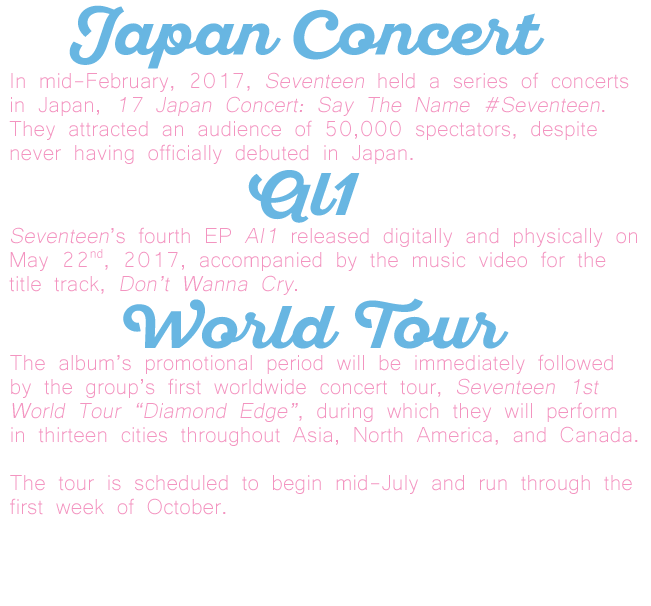
<style>
.page{position:relative;width:651px;height:606px;background:#ffffff}
.page>*{position:absolute;margin:0}
.t1{font:60px "SantEliaScript-BoldDMO";color:#68b6e2;scale:1.1 1}
.t2{font:28px/24px "Microsoft-Yi-Baiti";color:#f394c0}
.t3{font:28px/24px "Microsoft-Yi-Baiti";color:#f394c0;font-style:italic}
</style>
<div class="page">
<p class="t1" style="left:69px;top:5px;width:476px;height:64px">Japan Concert</p>
<p class="t2" style="left:9px;top:72px;width:620px;height:92px">In mid-February, 2017, <span class="t3">Seventeen</span> held a series of concerts<br>in Japan, <span class="t3">17 Japan Concert: Say The Name #Seventeen</span>.<br>They attracted an audience of 50,000 spectators, despite<br>never having officially debuted in Japan.</p>
<p class="t1" style="left:248px;top:170px;width:112px;height:53px">Al1</p>
<p class="t2" style="left:9px;top:227px;width:628px;height:68px"><span class="t3">Seventeen</span>’s fourth EP <span class="t3">Al1</span> released digitally and physically on<br>May 22nd, 2017, accompanied by the music video for the<br>title track, <span class="t3">Don’t Wanna Cry</span>.</p>
<p class="t1" style="left:123px;top:298px;width:386px;height:51px">World Tour</p>
<p class="t2" style="left:10px;top:354px;width:628px;height:161px">The album’s promotional period will be immediately followed<br>by the group’s first worldwide concert tour, <span class="t3">Seventeen 1st<br>World Tour “Diamond Edge”</span>, during which they will perform<br>in thirteen cities throughout Asia, North America, and Canada.<br><br>The tour is scheduled to begin mid-July and run through the<br>first week of October.</p>
</div>
